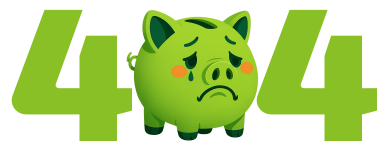
<style>
.page{position:relative;width:389px;height:150px;background:#ffffff}
.page>*{position:absolute;margin:0}
.t1{font:190px "Exo2Roman-Black";color:#89c026}
</style>
<div class="page">
<p class="t1" style="left:11px;top:9px;width:366px;height:132px">4   4</p>
</div>
